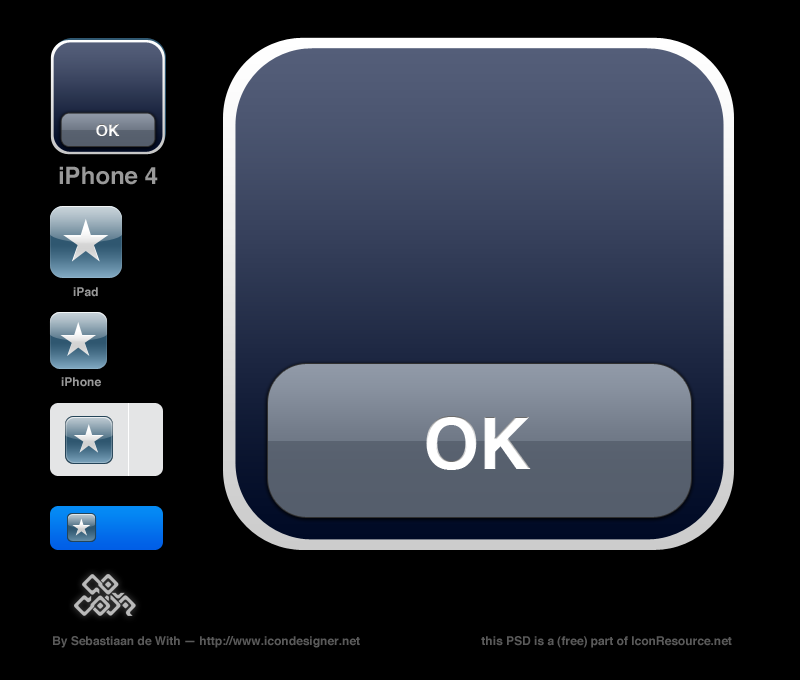
<style>
.page{position:relative;width:800px;height:680px;background:#000000}
.page>*{position:absolute;margin:0}
.t1{font:16.1px "Helvetica-Bold";color:#ffffff}
.t2{font:24px "Helvetica-Bold";color:#999999}
.t3{font:12px "Helvetica-Bold";color:#999999}
.t4{font:72px "Helvetica-Bold";color:#ffffff}
.t5{font:12px "Helvetica-Bold";color:#5a5a5a}
</style>
<div class="page">
<p class="t1" style="left:96px;top:124px;width:24px;height:12px">OK</p>
<p class="t2" style="left:59px;top:166px;width:99px;height:19px">iPhone 4</p>
<p class="t3" style="left:73px;top:287px;width:25px;height:10px">iPad</p>
<p class="t3" style="left:61px;top:377px;width:40px;height:10px">iPhone</p>
<p class="t4" style="left:426px;top:416px;width:105px;height:54px">OK</p>
<p class="t5" style="left:53px;top:636px;width:679px;height:12px">By Sebastiaan de With — http://www.icondesigner.net              this PSD is a (free) part of IconResource.net</p>
</div>
